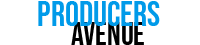
<style>
.page{position:relative;width:200px;height:45px;background:#ffffff}
.page>*{position:absolute;margin:0}
.t1{font:35px "BebasNeue-Regular";color:#009ae9}
.t2{font:32px "BebasNeue-Regular";color:#000000}
</style>
<div class="page">
<p class="t1" style="left:38px;top:1px;width:122px;height:25px">Producers</p>
<p class="t2" style="left:71px;top:22px;width:73px;height:23px">avenue</p>
</div>
